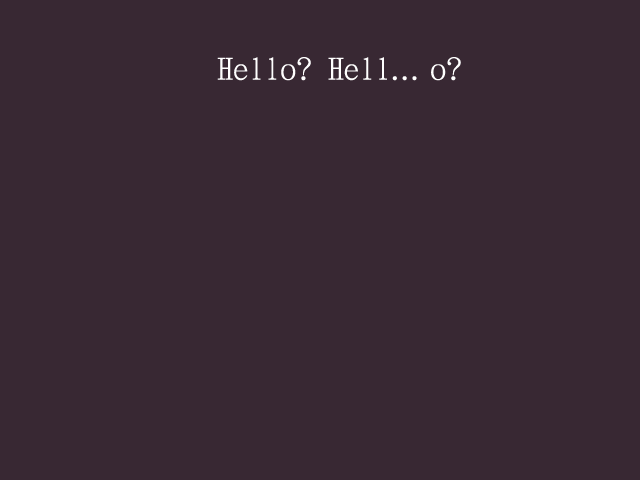
<style>
.page{position:relative;width:640px;height:480px;background:#382833}
.page>*{position:absolute;margin:0}
.t1{font:30px "DFKaiSho-Lt-WIN-RKSJ-H";color:#ffffff;font-weight:bold}
.t2{font:30px "DFKaiSho-Lt-WIN-RKSJ-H";letter-spacing:-0.2em;color:#ffffff;font-weight:bold}
</style>
<div class="page">
<p class="t1" style="left:217px;top:57px;width:244px;height:24px">Hello? Hell<span class="t2">... </span>o?</p>
</div>
